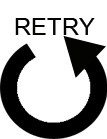
<style>
.page{position:relative;width:107px;height:139px;background:#ffffff}
.page>*{position:absolute;margin:0}
.t1{font:33.3px "Utsaah";color:#030301}
</style>
<div class="page">
<p class="t1" style="left:15px;top:18px;width:80px;height:17px">RETRY</p>
</div>
